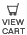
<style>
.page{position:relative;width:27px;height:35px;background:#ffffff}
.page>*{position:absolute;margin:0}
.t1{font:8px "MS Sans Serif";letter-spacing:0.05em;color:#4c4c4c}
</style>
<div class="page">
<p class="t1" style="left:2px;top:19px;width:23px;height:15px">VIEW<br>CART</p>
</div>
